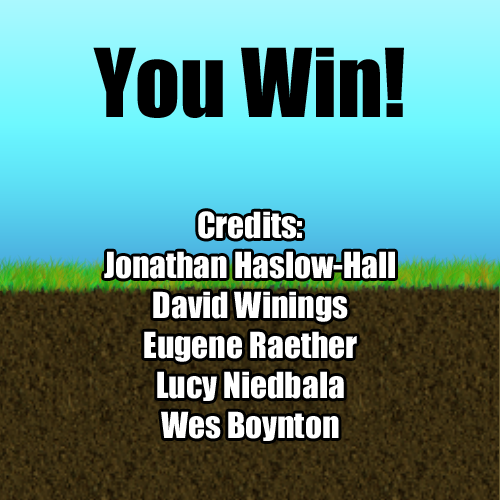
<style>
.page{position:relative;width:500px;height:500px}
.page>*{position:absolute;margin:0}
.t1{font:87.5px "Impact";color:#000000}
.t2{font:33.3px "Impact";color:#ffffff}
</style>
<div class="page">
<p class="t1" style="left:93px;top:47px;width:311px;height:71px">You Win!</p>
<p class="t2" style="left:104px;top:211px;width:291px;height:230px;text-align:center">Credits:<br>Jonathan Haslow-Hall<br>David Winings<br>Eugene Raether<br>Lucy Niedbala<br>Wes Boynton</p>
</div>
